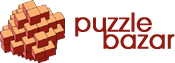
<style>
.page{position:relative;width:175px;height:63px;background:#ffffff}
.page>*{position:absolute;margin:0}
.t1{font:25.7px "AvantGarde-Book-Bold";color:#921b12;scale:0.95 1}
</style>
<div class="page">
<p class="t1" style="left:75px;top:12px;width:77px;height:25px">puzzle</p>
<p class="t1" style="left:103px;top:29px;width:72px;height:21px">bazar</p>
</div>
